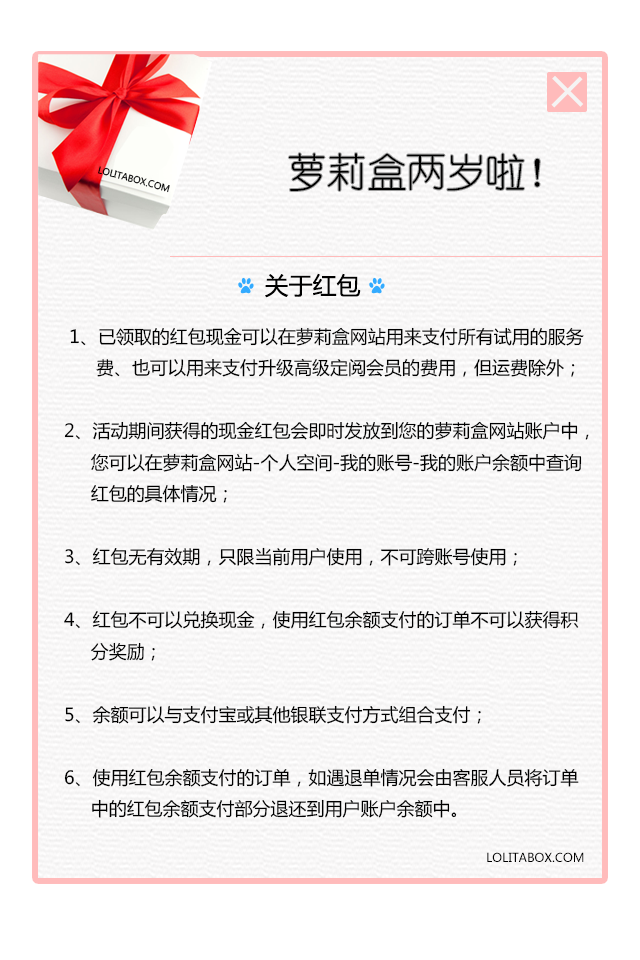
<style>
.page{position:relative;width:640px;height:960px;background:#ffffff}
.page>*{position:absolute;margin:0}
.t1{font:39.8px "YouYuan";color:#000000}
.t2{font:9px "MicrosoftYaHei";color:#000000}
.t3{font:24px "MicrosoftYaHei";color:#000000}
.t4{font:18px "MicrosoftYaHei";color:#000000}
.t5{font:12px "MicrosoftYaHei";color:#000000}
</style>
<div class="page">
<p class="t1" style="left:288px;top:153px;width:252px;height:38px">萝莉盒两岁啦！</p>
<p class="t2" style="left:98px;top:166px;width:72px;height:27px;rotate:15deg">LOLITABOX.COM</p>
<p class="t3" style="left:265px;top:273px;width:96px;height:25px">关于红包</p>
<p class="t4" style="left:64px;top:327px;width:525px;height:491px">1、已领取的红包现金可以在萝莉盒网站用来支付所有试用的服务<br>      费、也可以用来支付升级高级定阅会员的费用，但运费除外；<br><br>2、活动期间获得的现金红包会即时发放到您的萝莉盒网站账户中，<br>     您可以在萝莉盒网站-个人空间-我的账号-我的账户余额中查询<br>     红包的具体情况；<br><br>3、红包无有效期，只限当前用户使用，不可跨账号使用；<br><br>4、红包不可以兑换现金，使用红包余额支付的订单不可以获得积<br>     分奖励；<br><br>5、余额可以与支付宝或其他银联支付方式组合支付；<br><br>6、使用红包余额支付的订单，如遇退单情况会由客服人员将订单<br>     中的红包余额支付部分退还到用户账户余额中。</p>
<p class="t5" style="left:487px;top:852px;width:97px;height:10px">LOLITABOX.COM</p>
</div>
